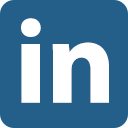
<style>
.page{position:relative;width:128px;height:128px;background:#235f89}
.page>*{position:absolute;margin:0}
.t1{font:120px "MyriadPro-Bold";color:#ffffff}
</style>
<div class="page">
<p class="t1" style="left:21px;top:18px;width:20px;height:85px">i</p>
<p class="t1" style="left:52px;top:42px;width:57px;height:61px">n</p>
</div>
